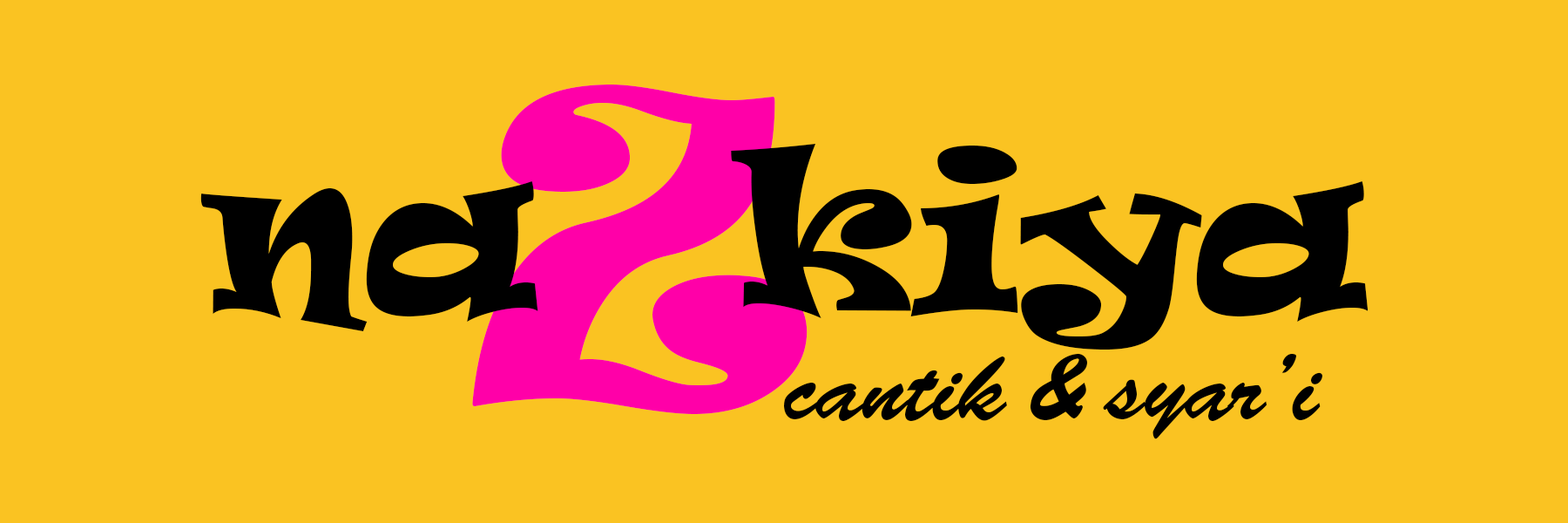
<style>
.page{position:relative;width:1568px;height:523px;background:#fac322}
.page>*{position:absolute;margin:0}
.t1{font:416.8px "Ravie";color:#ff00a8;scale:0.88 1}
.t2{font:208.4px "Ravie";color:#000000}
.t3{font:94.3px "BrushScriptStd";color:#000000}
</style>
<div class="page">
<p class="t1" style="left:472px;top:84px;width:336px;height:330px">Z</p>
<p class="t2" style="left:200px;top:144px;width:1168px;height:205px">na   kiya</p>
<p class="t3" style="left:784px;top:353px;width:538px;height:86px">cantik &amp; syar’i</p>
</div>
